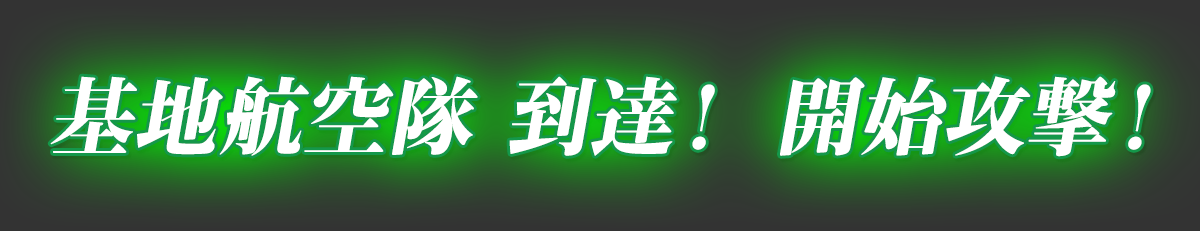
<style>
.page{position:relative;width:1200px;height:231px}
.page>*{position:absolute;margin:0}
.t1{font:84px "KochoStd-Heavy";letter-spacing:0.005em;color:#ffffff;font-weight:bold;font-style:italic}
</style>
<div class="page">
<p class="t1" style="left:50px;top:76px;width:1101px;height:81px">基地航空隊 到達！ 開始攻撃！</p>
</div>
